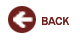
<style>
.page{position:relative;width:80px;height:40px;background:#ffffff}
.page>*{position:absolute;margin:0}
.t1{font:12px "FranklinGothic-Medium";color:#6f201c}
</style>
<div class="page">
<p class="t1" style="left:42px;top:17px;width:27px;height:8px">BACK</p>
</div>
